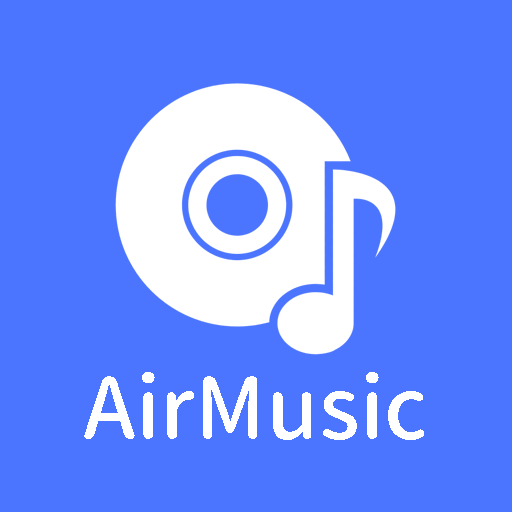
<style>
.page{position:relative;width:512px;height:512px;background:#4b75ff}
.page>*{position:absolute;margin:0}
.t1{font:85.4px "GenJyuuGothic-Medium";color:#ffffff}
</style>
<div class="page">
<p class="t1" style="left:84px;top:372px;width:340px;height:68px">AirMusic</p>
</div>
